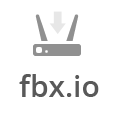
<style>
.page{position:relative;width:114px;height:114px;background:#ffffff}
.page>*{position:absolute;margin:0}
.t1{font:30px "OpenSans-Semibold";color:#595959}
</style>
<div class="page">
<p class="t1" style="left:19px;top:74px;width:80px;height:23px">fbx.io</p>
</div>
